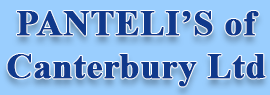
<style>
.page{position:relative;width:270px;height:95px;background:#9acefe}
.page>*{position:absolute;margin:0}
.t1{font:36px "TimesNewRomanPS-BoldMT";color:#10398b;font-weight:bold}
</style>
<div class="page">
<p class="t1" style="left:7px;top:11px;width:259px;height:76px;text-align:center">PANTELI’S of<br>Canterbury Ltd</p>
</div>
